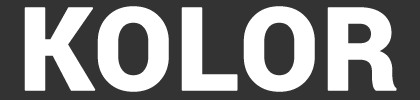
<style>
.page{position:relative;width:420px;height:100px;background:#333333}
.page>*{position:absolute;margin:0}
.t1{font:115px "Roboto-Black";color:#ffffff;font-weight:bold}
</style>
<div class="page">
<p class="t1" style="left:24px;top:6px;width:373px;height:86px">KOLOR</p>
</div>
